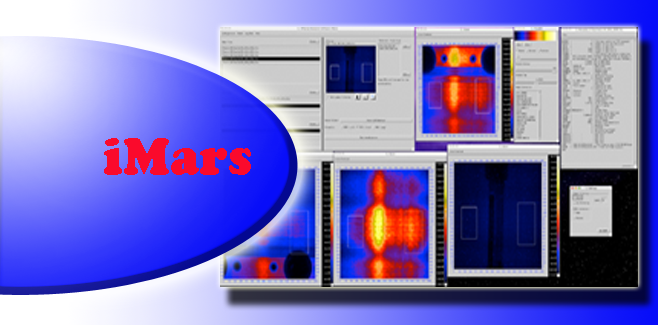
<style>
.page{position:relative;width:658px;height:325px}
.page>*{position:absolute;margin:0}
.t1{font:53px "CooperBlack";color:#fa0a2c}
</style>
<div class="page">
<p class="t1" style="left:104px;top:138px;width:147px;height:37px">iMars</p>
</div>
